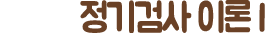
<style>
.page{position:relative;width:266px;height:33px;background:#ffffff}
.page>*{position:absolute;margin:0}
.t1{font:40px "BMJUA";letter-spacing:-0.05em;color:#6a4126;scale:0.9 1}
</style>
<div class="page">
<p class="t1" style="left:80px;top:0px;width:185px;height:34px">정기검사 이론 I</p>
</div>
